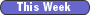
<style>
.page{position:relative;width:90px;height:15px;background:#6666cc}
.page>*{position:absolute;margin:0}
.t1{font:12px "FranklinGothic-Condensed";letter-spacing:0.05em;color:#ffffff}
</style>
<div class="page">
<p class="t1" style="left:17px;top:2px;width:54px;height:9px">This Week</p>
</div>
